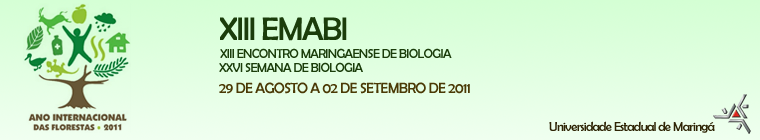
<style>
.page{position:relative;width:760px;height:140px}
.page>*{position:absolute;margin:0}
.t1{font:33px "BerlinSansFB-Reg";letter-spacing:-0.05em;color:#1b3d0b}
.t2{font:13px "BerlinSansFB-Reg";letter-spacing:-0.05em;color:#1b3d0b}
.t3{font:15px "BerlinSansFB-Reg";letter-spacing:-0.05em;color:#4b3a06}
.t4{font:13px "BerlinSansFB-Reg";letter-spacing:-0.05em;color:#2f2506}
</style>
<div class="page">
<p class="t1" style="left:220px;top:17px;width:127px;height:24px">XIII EMABI</p>
<p class="t2" style="left:220px;top:48px;width:232px;height:10px">XIII ENCONTRO MARINGAENSE DE BIOLOGIA</p>
<p class="t2" style="left:219px;top:62px;width:144px;height:10px">XXVI SEMANA DE BIOLOGIA</p>
<p class="t3" style="left:219px;top:82px;width:251px;height:12px">29 DE AGOSTO A 02 DE SETEMBRO DE 2011</p>
<p class="t4" style="left:549px;top:121px;width:166px;height:12px">Universidade Estadual de Maringá</p>
</div>
